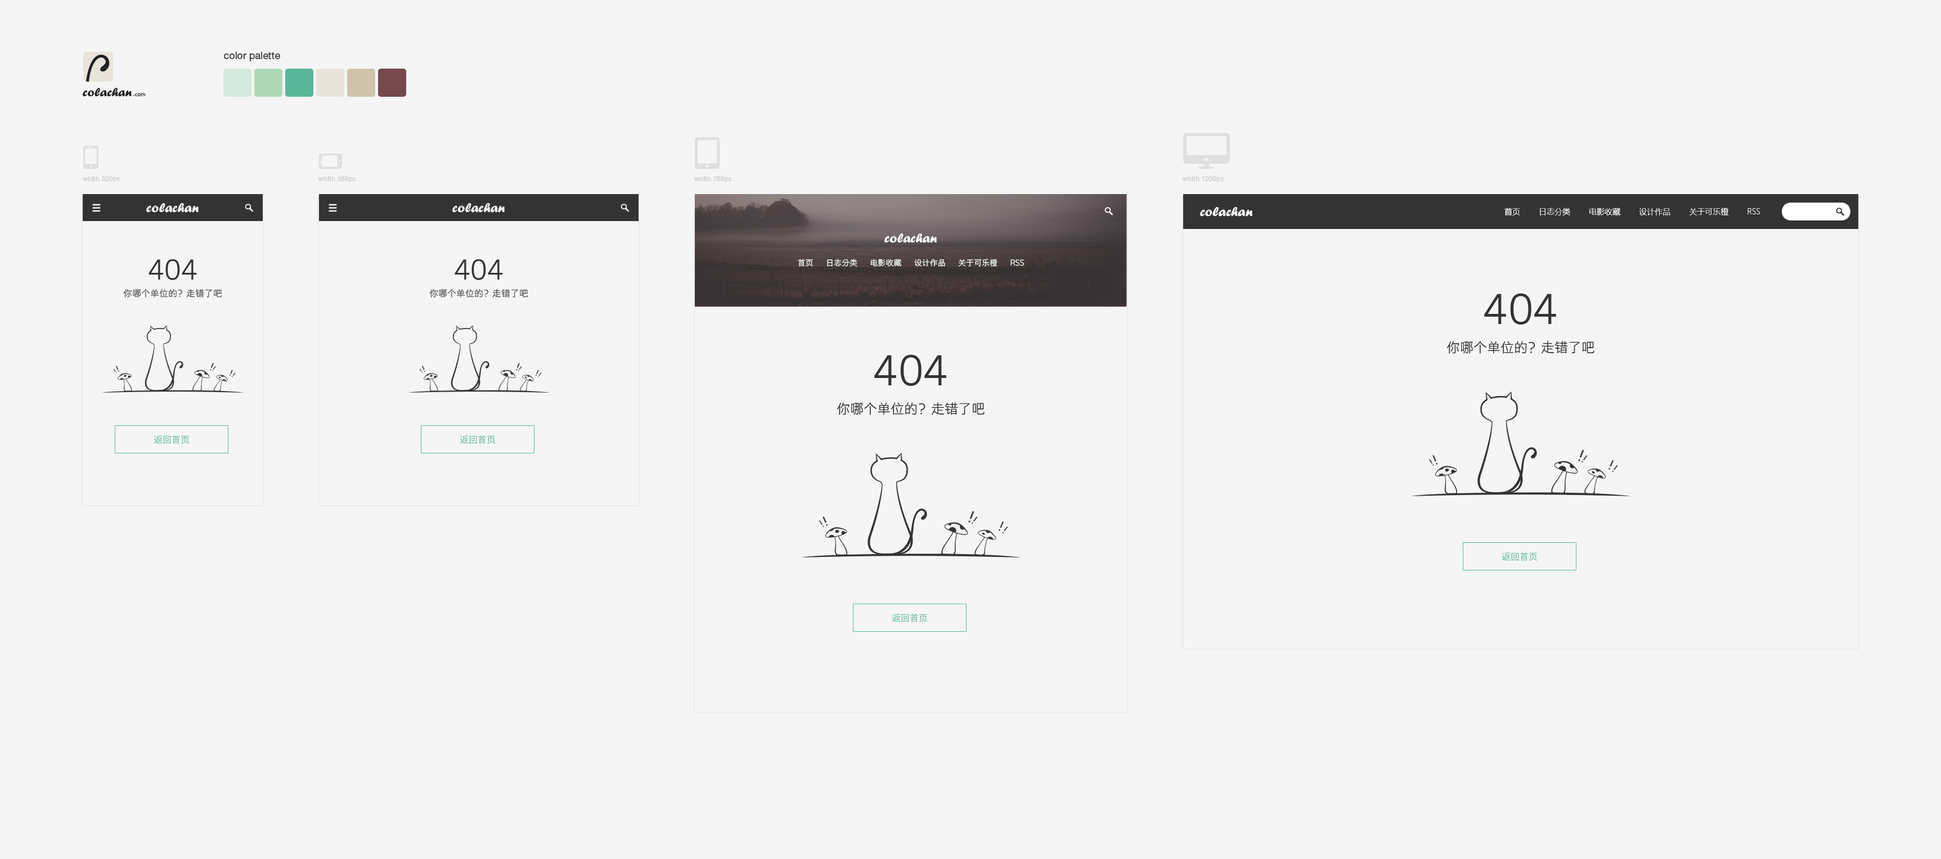
<style>
.page{position:relative;width:1941px;height:859px;background:#f5f5f5}
.page>*{position:absolute;margin:0}
.t1{font:10.1px "HelveticaNeueLTPro-Roman";color:#333333}
.t2{font:6.8px "HelveticaNeueLTPro-Roman";color:#cccccc}
.t3{font:13.5px "ForteMT";color:#f5f5f5}
.t4{font:13.5px "ForteMT";color:#ffffff}
.t5{font:7.9px "MicrosoftYaHeiLight";color:#ffffff}
.t6{font:27px "STHeitiSC-Light";color:#333333}
.t7{font:7.9px "STHeitiSC-Light";color:#ffffff}
.t8{font:9px "STHeitiSC-Light";color:#333333}
.t9{font:40.5px "STHeitiSC-Light";color:#333333}
.t10{font:13.5px "STHeitiSC-Light";color:#333333}
.t11{font:9px "STHeitiSC-Light";color:#58b798}
</style>
<div class="page">
<p class="t1" style="left:224px;top:52px;width:56px;height:9px">color palette</p>
<p class="t2" style="left:83px;top:176px;width:37px;height:6px">width 320px</p>
<p class="t2" style="left:318px;top:176px;width:38px;height:6px">width 568px</p>
<p class="t2" style="left:694px;top:176px;width:38px;height:6px">width 768px</p>
<p class="t2" style="left:1182px;top:176px;width:42px;height:6px">width 1200px</p>
<p class="t3" style="left:146px;top:203px;width:53px;height:10px">colachan</p>
<p class="t3" style="left:452px;top:203px;width:53px;height:10px">colachan</p>
<p class="t4" style="left:1200px;top:207px;width:52px;height:10px">colachan</p>
<p class="t5" style="left:1504px;top:208px;width:256px;height:7px">首页        日志分类        电影收藏        设计作品        关于可乐橙        RSS</p>
<p class="t4" style="left:884px;top:233px;width:53px;height:10px">colachan</p>
<p class="t6" style="left:148px;top:259px;width:49px;height:21px">404</p>
<p class="t6" style="left:454px;top:259px;width:49px;height:21px">404</p>
<p class="t7" style="left:798px;top:259px;width:226px;height:8px">首页        日志分类        电影收藏        设计作品        关于可乐橙        RSS</p>
<p class="t8" style="left:123px;top:289px;width:99px;height:9px">你哪个单位的？走错了吧</p>
<p class="t8" style="left:429px;top:289px;width:99px;height:9px">你哪个单位的？走错了吧</p>
<p class="t9" style="left:1484px;top:293px;width:72px;height:32px">404</p>
<p class="t10" style="left:1447px;top:341px;width:147px;height:13px">你哪个单位的？走错了吧</p>
<p class="t9" style="left:874px;top:354px;width:72px;height:32px">404</p>
<p class="t10" style="left:837px;top:402px;width:147px;height:13px">你哪个单位的？走错了吧</p>
<p class="t11" style="left:154px;top:435px;width:35px;height:9px">返回首页</p>
<p class="t11" style="left:460px;top:435px;width:35px;height:9px">返回首页</p>
<p class="t11" style="left:1501px;top:552px;width:36px;height:9px">返回首页</p>
<p class="t11" style="left:892px;top:614px;width:35px;height:8px">返回首页</p>
</div>
